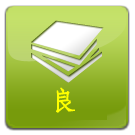
<style>
.page{position:relative;width:135px;height:135px}
.page>*{position:absolute;margin:0}
.t1{font:26px "STFangsong";letter-spacing:0.1em;color:#ffff00;font-weight:bold}
</style>
<div class="page">
<p class="t1" style="left:56px;top:87px;width:19px;height:26px">良</p>
</div>
